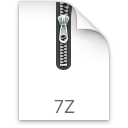
<style>
.page{position:relative;width:128px;height:128px;background:#ffffff}
.page>*{position:absolute;margin:0}
.t1{font:18px "SFProDisplay-Regular";color:#676767}
</style>
<div class="page">
<p class="t1" style="left:54px;top:100px;width:21px;height:13px">7Z</p>
</div>
